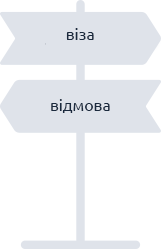
<style>
.page{position:relative;width:161px;height:249px;background:#ffffff}
.page>*{position:absolute;margin:0}
.t1{font:16px "Ubuntu-Regular";color:#1b2a3e}
</style>
<div class="page">
<p class="t1" style="left:66px;top:28px;width:28px;height:12px">віза</p>
<p class="t1" style="left:51px;top:99px;width:59px;height:14px">відмова</p>
</div>
